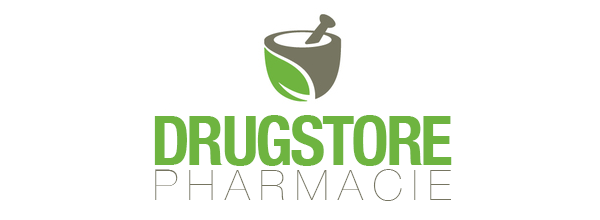
<style>
.page{position:relative;width:600px;height:220px;background:#ffffff}
.page>*{position:absolute;margin:0}
.t1{font:67.9px "HelveticaNeue-CondensedBold";letter-spacing:-0.05em;color:#6eb440}
.t2{font:42.4px "HelveticaNeue-UltraLight";letter-spacing:0.235em;color:#767561}
</style>
<div class="page">
<p class="t1" style="left:154px;top:115px;width:298px;height:51px">DRUGSTORE</p>
<p class="t2" style="left:155px;top:169px;width:296px;height:32px">PHARMACIE</p>
</div>
